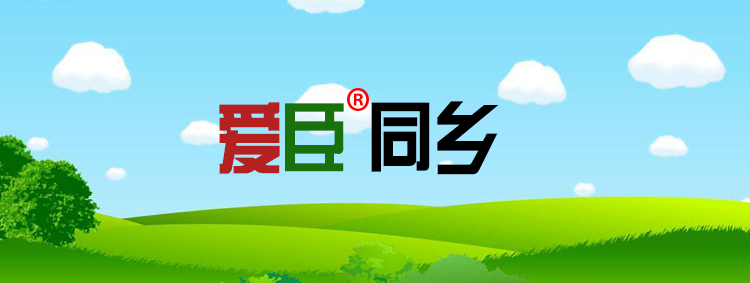
<style>
.page{position:relative;width:750px;height:283px}
.page>*{position:absolute;margin:0}
.t1{font:80px "FZZYJW--GB1-0";color:#000000;scale:0.84 1}
.t2{font:80px "FZZYJW--GB1-0";color:#b52121;scale:0.84 1}
.t3{font:80px "FZZYJW--GB1-0";color:#1a710c;scale:0.84 1}
</style>
<div class="page">
<p class="t1" style="left:219px;top:101px;width:280px;height:74px"><span class="t2">爱</span><span class="t3">臣 </span>同乡</p>
</div>
